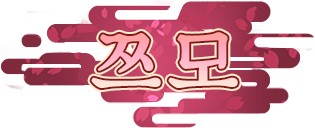
<style>
.page{position:relative;width:315px;height:128px;background:#ffffff}
.page>*{position:absolute;margin:0}
.t1{font:78.3px "SDKukdetopokki-aLt";letter-spacing:0.06em}
</style>
<div class="page">
<p class="t1" style="left:91px;top:32px;width:147px;height:56px">쯔모</p>
</div>
